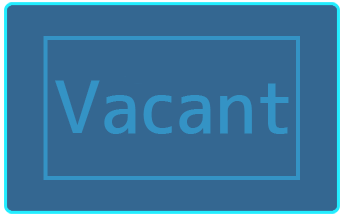
<style>
.page{position:relative;width:344px;height:216px;background:#346791}
.page>*{position:absolute;margin:0}
.t1{font:72px "JK-Gothic-M";color:#3493c5}
</style>
<div class="page">
<p class="t1" style="left:55px;top:80px;width:234px;height:54px">Vacant</p>
</div>
